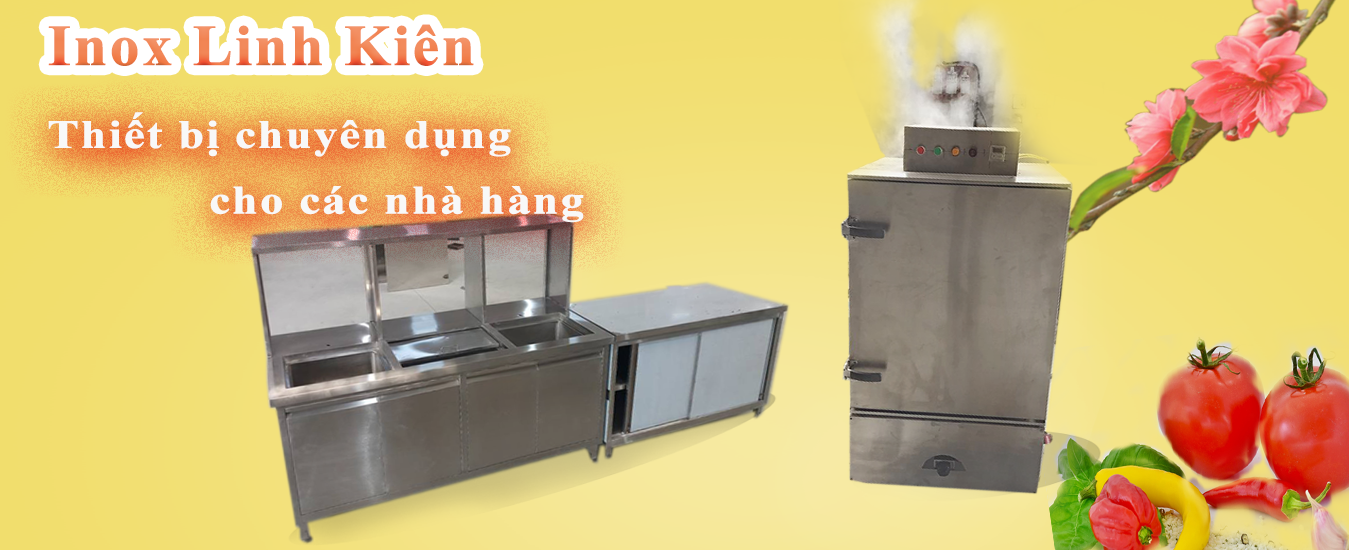
<style>
.page{position:relative;width:1349px;height:550px}
.page>*{position:absolute;margin:0}
.t1{font:57.4px "TimesNewRomanPS-BoldMT";letter-spacing:0.02em;color:#f28554;font-weight:bold;scale:1.04 1}
.t2{font:39.7px "TimesNewRomanPS-BoldMT";letter-spacing:0.02em;color:#f8f8f8;font-weight:bold;scale:1.17 1}
</style>
<div class="page">
<p class="t1" style="left:48px;top:24px;width:426px;height:42px">Inox Linh Kiên</p>
<p class="t2" style="left:48px;top:112px;width:536px;height:111px;text-align:center">Thiết bị chuyên dụng <br>                cho các nhà hàng</p>
</div>
